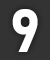
<style>
.page{position:relative;width:50px;height:60px;background:#333333}
.page>*{position:absolute;margin:0}
.t1{font:60px "Bahnschrift-Bold";color:#ffffff}
</style>
<div class="page">
<p class="t1" style="left:12px;top:9px;width:26px;height:43px">9</p>
</div>
